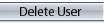
<style>
.page{position:relative;width:104px;height:25px}
.page>*{position:absolute;margin:0}
.t1{font:13px "Myriad-Roman";color:#000000}
</style>
<div class="page">
<p class="t1" style="left:20px;top:6px;width:62px;height:10px">Delete User</p>
</div>
